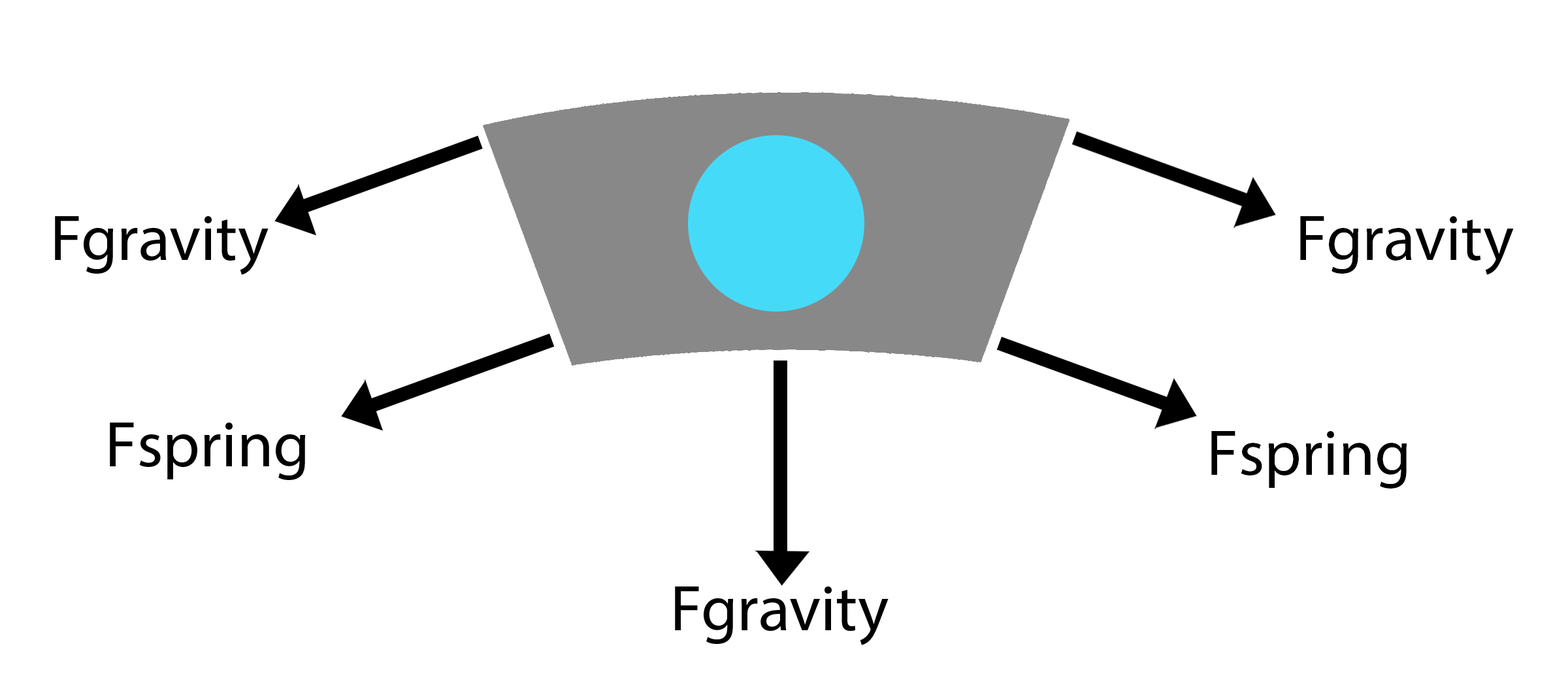
<style>
.page{position:relative;width:1568px;height:674px;background:#ffffff}
.page>*{position:absolute;margin:0}
.t1{font:65.3px "MyriadPro-Regular";color:#000000}
</style>
<div class="page">
<p class="t1" style="left:1300px;top:216px;width:214px;height:59px">Fgravity</p>
<p class="t1" style="left:1211px;top:431px;width:196px;height:58px">Fspring</p>
</div>
